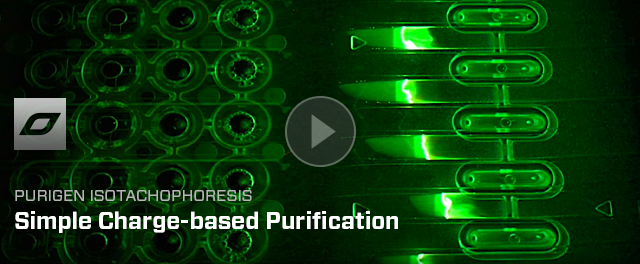
<style>
.page{position:relative;width:640px;height:264px}
.page>*{position:absolute;margin:0}
.t1{font:15.9px "Forza-Book";color:#b5b7b5;text-transform:uppercase;scale:1.05 1}
.t2{font:23.5px "Forza-Bold";color:#ffffff}
</style>
<div class="page">
<p class="t1" style="left:15px;top:190px;width:237px;height:11px">Purigen Isotachophoresis</p>
<p class="t2" style="left:15px;top:211px;width:383px;height:22px">Simple Charge-based Purification</p>
</div>
